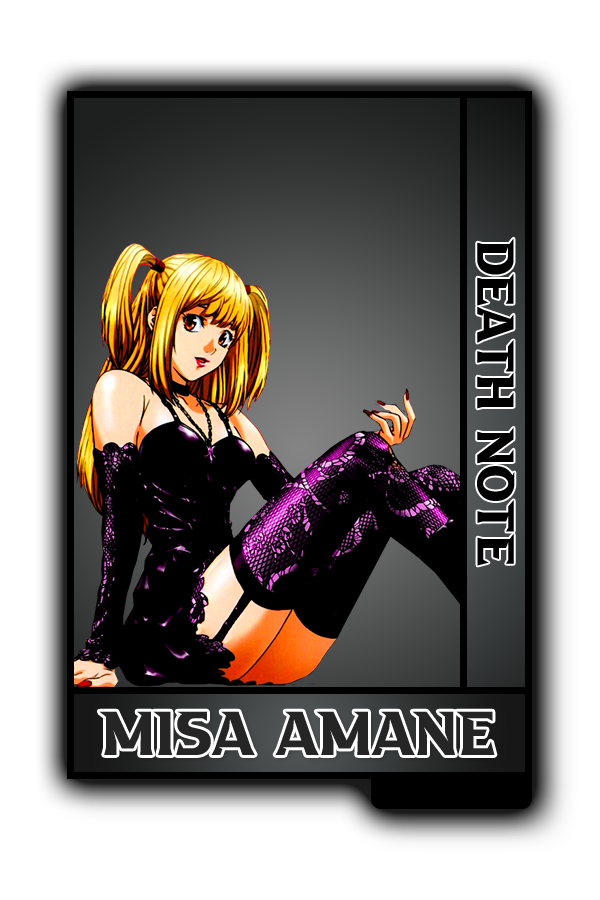
<style>
.page{position:relative;width:600px;height:900px;background:#ffffff}
.page>*{position:absolute;margin:0}
.t1{font:48.8px "aAbsoluteEmpire";color:#000000}
.t2{font:58.3px "aAbsoluteEmpire";color:#252525}
</style>
<div class="page">
<p class="t1" style="left:477px;top:238px;width:38px;height:328px;rotate:90deg">Death Note</p>
<p class="t2" style="left:99px;top:711px;width:396px;height:44px">Misa Amane</p>
</div>
